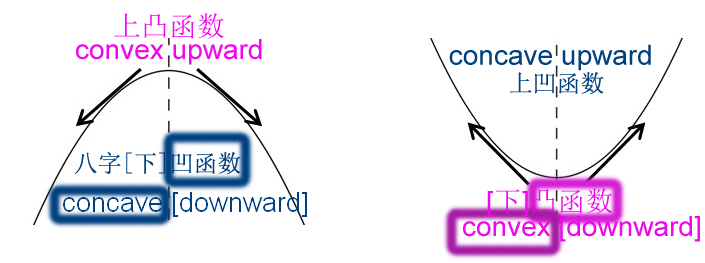
<style>
.page{position:relative;width:705px;height:263px;background:#ffffff}
.page>*{position:absolute;margin:0}
.t1{font:28px "SimSun";color:#ed09ea}
.t2{font:28px "ArialMT";color:#ed09ea}
.t3{font:28px "ArialMT";color:#004080}
.t4{font:24px "SimSun";color:#004080}
</style>
<div class="page">
<p class="t1" style="left:114px;top:13px;width:110px;height:26px">上凸函数</p>
<p class="t2" style="left:76px;top:39px;width:186px;height:26px">convex upward</p>
<p class="t3" style="left:449px;top:44px;width:202px;height:27px">concave upward</p>
<p class="t4" style="left:509px;top:71px;width:95px;height:24px">上凹函数</p>
<p class="t4" style="left:74px;top:151px;width:167px;height:24px">八字[下]凹函数</p>
<p class="t1" style="left:487px;top:188px;width:126px;height:29px"><span class="t2">[</span>下<span class="t2">]</span>凸函数</p>
<p class="t2" style="left:463px;top:216px;width:237px;height:26px">convex [downward]</p>
</div>
